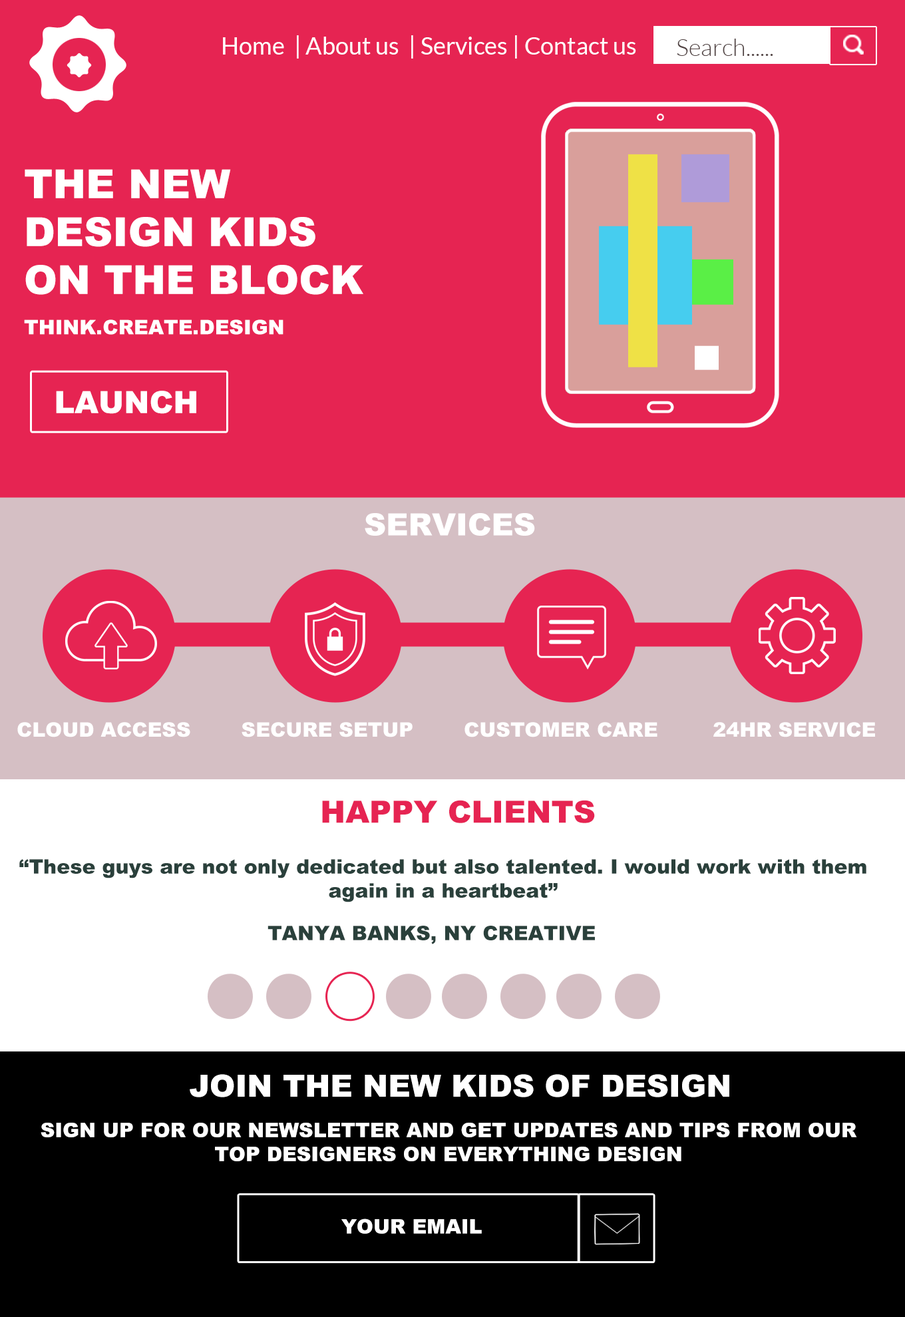
<style>
.page{position:relative;width:905px;height:1317px;background:#e62452}
.page>*{position:absolute;margin:0}
.t1{font:24px "Lato-Regular";color:#ffffff}
.t2{font:24px "Lato-Light";color:#504242}
.t3{font:39.9px "Arial-Black";color:#ffffff}
.t4{font:20px "Arial-Black";color:#ffffff}
.t5{font:30.6px "Arial-Black";color:#ffffff}
.t6{font:30.6px "Arial-Black";color:#e62452}
.t7{font:20px "Arial-Black";color:#2a403b}
</style>
<div class="page">
<p class="t1" style="left:223px;top:35px;width:413px;height:24px">Home  | About us  | Services | Contact us</p>
<p class="t2" style="left:677px;top:39px;width:96px;height:17px">Search......</p>
<p class="t3" style="left:25px;top:169px;width:338px;height:126px">THE NEW<br>DESIGN KIDS<br>ON THE BLOCK</p>
<p class="t4" style="left:24px;top:319px;width:260px;height:16px">THINK.CREATE.DESIGN</p>
<p class="t5" style="left:56px;top:391px;width:140px;height:23px">LAUNCH</p>
<p class="t5" style="left:365px;top:513px;width:170px;height:23px">SERVICES</p>
<p class="t4" style="left:17px;top:722px;width:173px;height:16px">CLOUD ACCESS</p>
<p class="t4" style="left:242px;top:722px;width:171px;height:16px">SECURE SETUP</p>
<p class="t4" style="left:465px;top:722px;width:193px;height:16px">CUSTOMER CARE</p>
<p class="t4" style="left:714px;top:722px;width:161px;height:16px">24HR SERVICE</p>
<p class="t6" style="left:322px;top:800px;width:273px;height:23px">HAPPY CLIENTS</p>
<p class="t7" style="left:19px;top:859px;width:848px;height:44px;text-align:center">“These guys are not only dedicated but also talented. I would work with them again in a heartbeat”</p>
<p class="t7" style="left:268px;top:926px;width:327px;height:19px">TANYA BANKS, NY CREATIVE</p>
<p class="t5" style="left:190px;top:1074px;width:540px;height:24px">JOIN THE NEW KIDS OF DESIGN</p>
<p class="t4" style="left:41px;top:1123px;width:816px;height:39px;text-align:center">SIGN UP FOR OUR NEWSLETTER AND GET UPDATES AND TIPS FROM OUR TOP DESIGNERS ON EVERYTHING DESIGN</p>
<p class="t4" style="left:341px;top:1219px;width:141px;height:15px">YOUR EMAIL</p>
</div>
